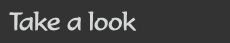
<style>
.page{position:relative;width:230px;height:43px;background:#333333}
.page>*{position:absolute;margin:0}
.t1{font:24.5px "Formal436BT-Regular";letter-spacing:-0.005em;color:#d4d7d6}
</style>
<div class="page">
<p class="t1" style="left:9px;top:11px;width:128px;height:20px">Take a look</p>
</div>
